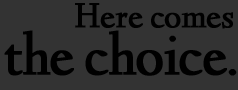
<style>
.page{position:relative;width:238px;height:90px;background:#333333}
.page>*{position:absolute;margin:0}
.t1{font:36px "LindenHill";letter-spacing:-0.02em;color:#000000;font-weight:bold}
.t2{font:60px "LindenHill";letter-spacing:-0.03em;color:#000000;font-weight:bold}
</style>
<div class="page">
<p class="t1" style="left:75px;top:3px;width:158px;height:26px">Here comes</p>
<p class="t2" style="left:4px;top:30px;width:233px;height:46px">the choice.</p>
</div>
